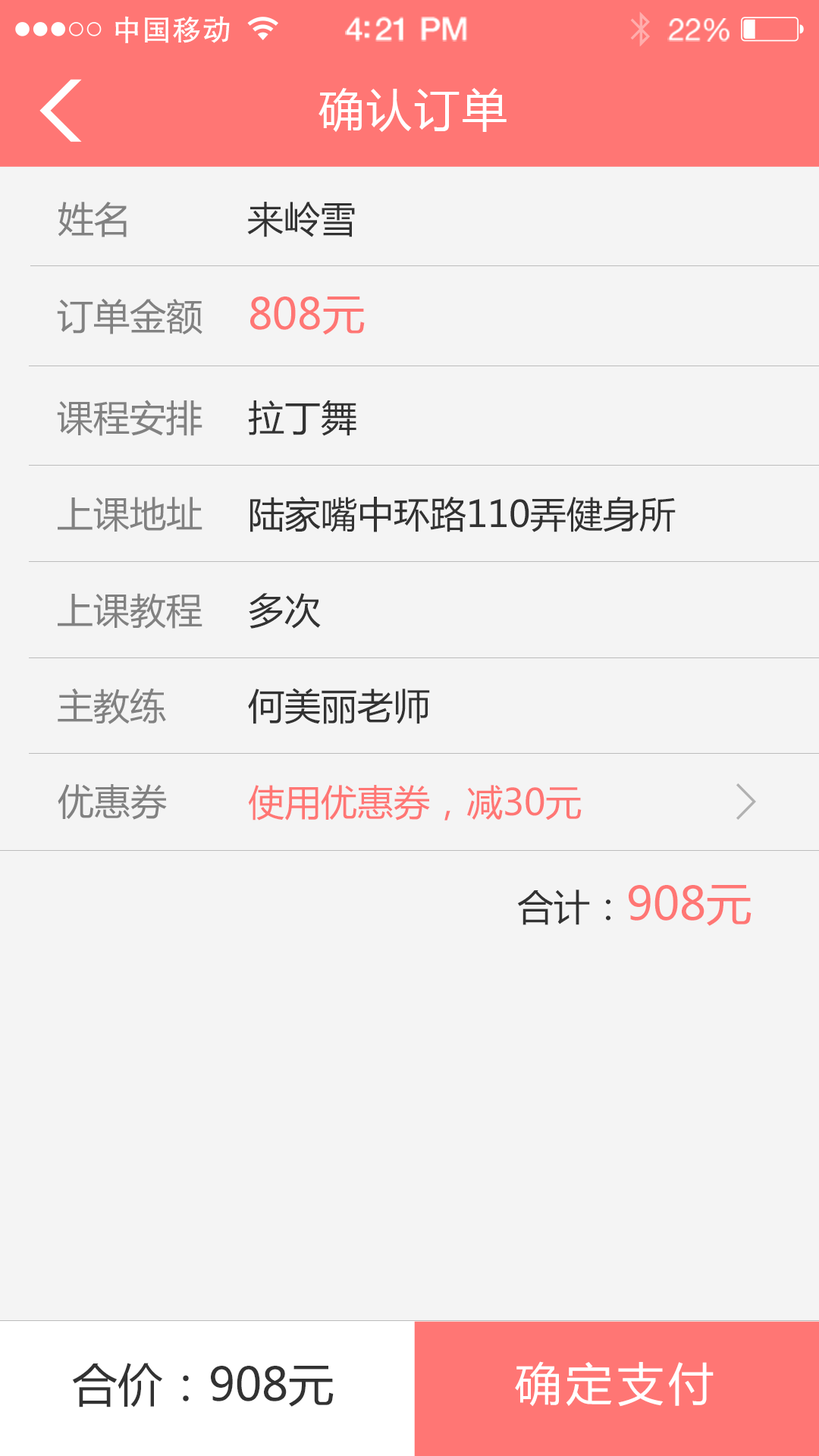
<style>
.page{position:relative;width:819px;height:1456px;background:#f4f4f4}
.page>*{position:absolute;margin:0}
.t1{font:29.4px "FZHTJW--GB1-0";letter-spacing:0.02em;color:#ffffff}
.t2{font:32px "HelveticaNeue-Medium";letter-spacing:-0.02em;color:#ffffff}
.t3{font:30.7px "HelveticaNeue";letter-spacing:-0.02em;color:#ffffff}
.t4{font:45.5px "MicrosoftYaHei";letter-spacing:0.05em;color:#ffffff}
.t5{font:36.4px "MicrosoftYaHei";color:#818181}
.t6{font:36.4px "MicrosoftYaHei";color:#323232}
.t7{font:42.5px "MicrosoftYaHei";color:#ff7674}
.t8{font:36.4px "MicrosoftYaHei";color:#ff7674}
.t9{font:45.5px "MicrosoftYaHei";color:#ff7674}
.t10{font:45.5px "MicrosoftYaHei";letter-spacing:0.1em;color:#ffffff}
.t11{font:45.5px "MicrosoftYaHei";color:#323232}
</style>
<div class="page">
<p class="t1" style="left:115px;top:16px;width:115px;height:27px">中国移动</p>
<p class="t2" style="left:345px;top:17px;width:122px;height:25px">4:21 PM</p>
<p class="t3" style="left:667px;top:18px;width:63px;height:24px">22%</p>
<p class="t4" style="left:318px;top:88px;width:189px;height:44px">确认订单</p>
<p class="t5" style="left:58px;top:202px;width:69px;height:35px">姓名</p>
<p class="t6" style="left:247px;top:202px;width:108px;height:35px">来岭雪</p>
<p class="t5" style="left:57px;top:298px;width:145px;height:36px">订单金额</p>
<p class="t7" style="left:250px;top:297px;width:115px;height:38px">808元</p>
<p class="t5" style="left:57px;top:400px;width:145px;height:36px">课程安排</p>
<p class="t6" style="left:248px;top:400px;width:108px;height:36px">拉丁舞</p>
<p class="t5" style="left:58px;top:497px;width:144px;height:35px">上课地址</p>
<p class="t6" style="left:250px;top:496px;width:426px;height:36px">陆家嘴中环路110弄健身所</p>
<p class="t5" style="left:58px;top:593px;width:144px;height:36px">上课教程</p>
<p class="t6" style="left:249px;top:593px;width:72px;height:36px">多次</p>
<p class="t5" style="left:58px;top:688px;width:108px;height:36px">主教练</p>
<p class="t6" style="left:248px;top:688px;width:182px;height:36px">何美丽老师</p>
<p class="t5" style="left:58px;top:784px;width:109px;height:36px">优惠券</p>
<p class="t8" style="left:248px;top:785px;width:334px;height:36px">使用优惠券，减30元</p>
<p class="t9" style="left:517px;top:885px;width:234px;height:41px"><span class="t6">合计：</span>908元</p>
<p class="t10" style="left:515px;top:1361px;width:199px;height:46px">确定支付</p>
<p class="t11" style="left:72px;top:1363px;width:262px;height:44px">合价：908元</p>
</div>
